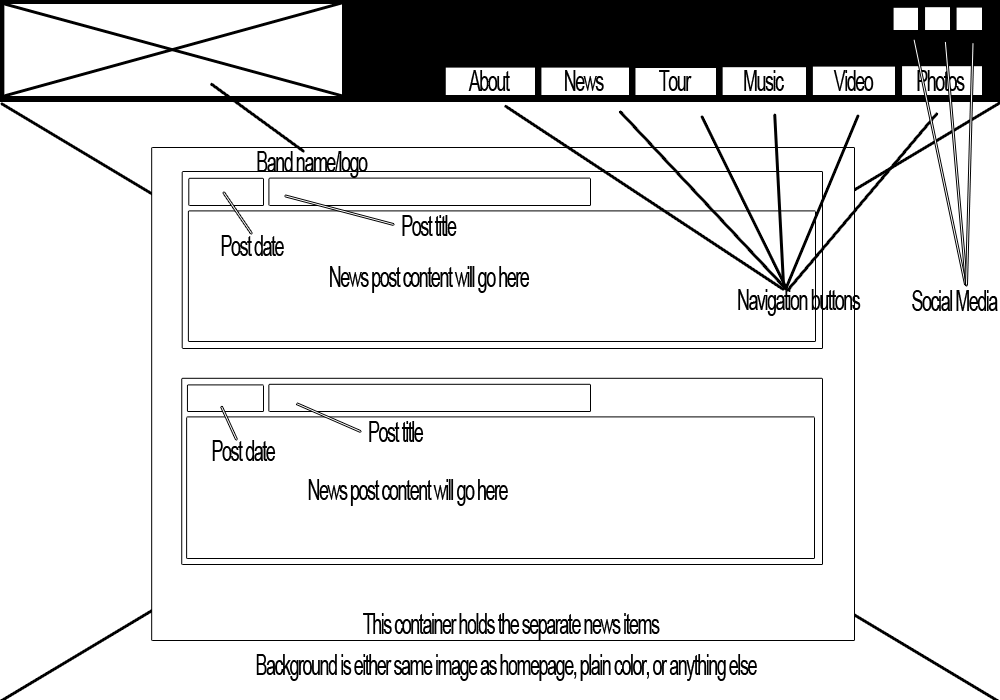
<style>
.page{position:relative;width:1000px;height:700px;background:#ffffff}
.page>*{position:absolute;margin:0}
.t1{font:28.9px "ArialMT";letter-spacing:-0.08em;color:#000000;scale:0.62 1}
</style>
<div class="page">
<p class="t1" style="left:468px;top:70px;width:42px;height:21px">About</p>
<p class="t1" style="left:565px;top:70px;width:39px;height:21px">News</p>
<p class="t1" style="left:659px;top:70px;width:33px;height:21px">Tour</p>
<p class="t1" style="left:744px;top:70px;width:40px;height:21px">Music</p>
<p class="t1" style="left:833px;top:70px;width:41px;height:21px">Video</p>
<p class="t1" style="left:917px;top:70px;width:48px;height:21px">Photos</p>
<p class="t1" style="left:257px;top:151px;width:111px;height:27px">Band name/logo</p>
<p class="t1" style="left:402px;top:215px;width:55px;height:21px">Post title</p>
<p class="t1" style="left:221px;top:235px;width:63px;height:21px">Post date</p>
<p class="t1" style="left:330px;top:266px;width:200px;height:27px">News post content will go here</p>
<p class="t1" style="left:738px;top:289px;width:123px;height:27px">Navigation buttons</p>
<p class="t1" style="left:912px;top:290px;width:86px;height:21px">Social Media</p>
<p class="t1" style="left:369px;top:421px;width:55px;height:21px">Post title</p>
<p class="t1" style="left:212px;top:440px;width:64px;height:21px">Post date</p>
<p class="t1" style="left:308px;top:479px;width:200px;height:27px">News post content will go here</p>
<p class="t1" style="left:363px;top:613px;width:297px;height:27px">This container holds the separate news items</p>
<p class="t1" style="left:256px;top:654px;width:501px;height:27px">Background is either same image as homepage, plain color, or anything else</p>
</div>
